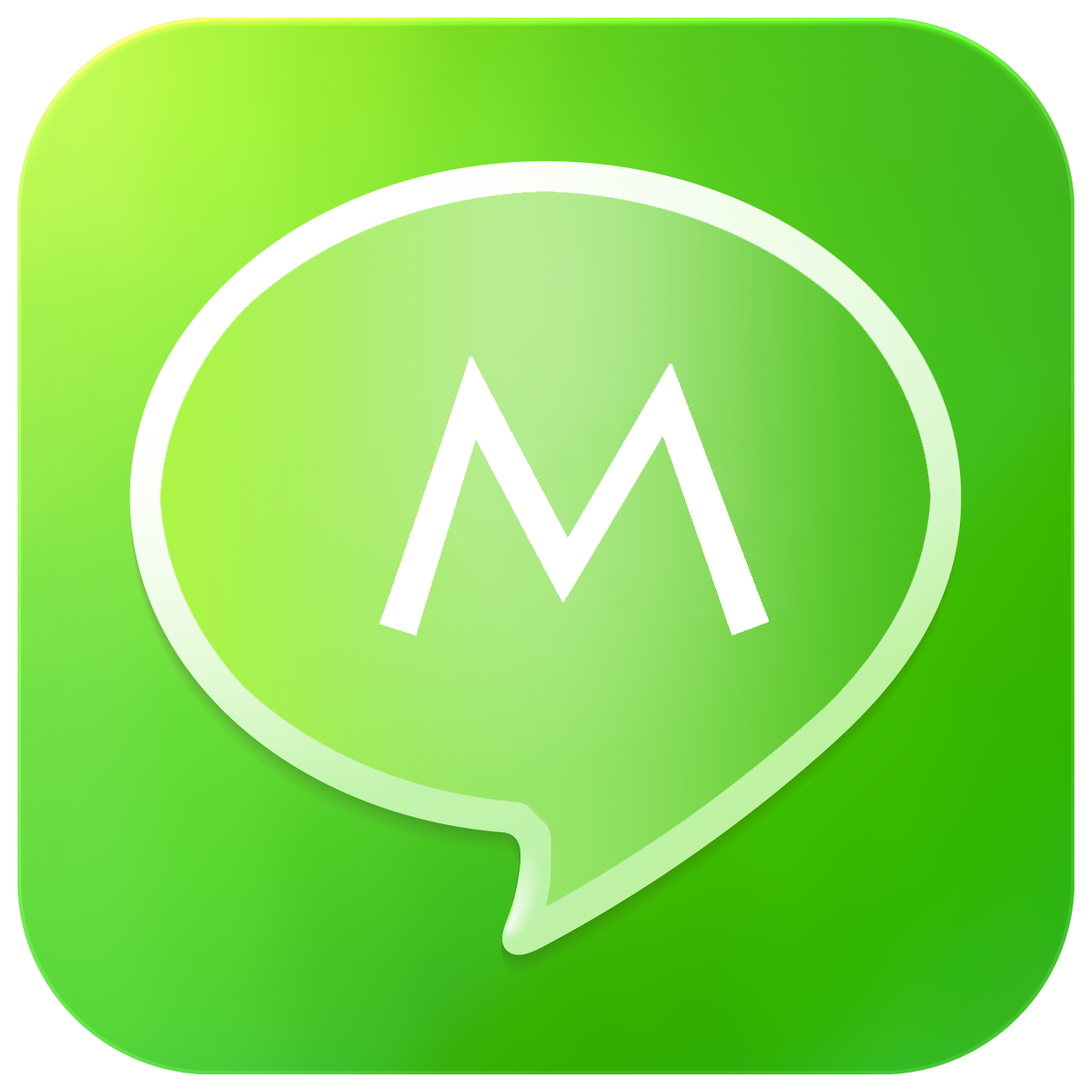
<style>
.page{position:relative;width:1092px;height:1092px}
.page>*{position:absolute;margin:0}
.t1{font:440.3px "LithosPro-Regular";color:#ffffff}
</style>
<div class="page">
<p class="t1" style="left:380px;top:357px;width:389px;height:279px">m</p>
</div>
